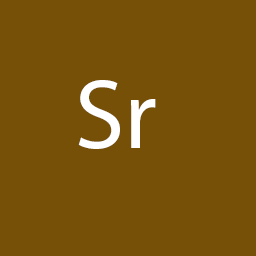
<style>
.page{position:relative;width:256px;height:256px;background:#765007}
.page>*{position:absolute;margin:0}
.t1{font:100px "MyriadPro-Regular";color:#ffffff}
</style>
<div class="page">
<p class="t1" style="left:78px;top:80px;width:78px;height:69px">Sr</p>
</div>
